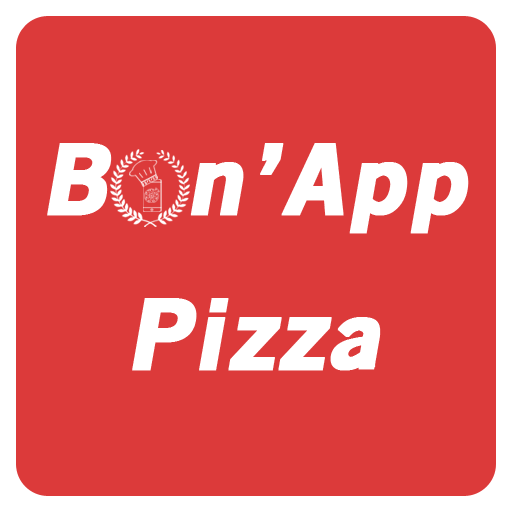
<style>
.page{position:relative;width:512px;height:512px;background:#dc3a3a}
.page>*{position:absolute;margin:0}
.t1{font:96px "OldSansBlack";letter-spacing:0.05em;color:#ffffff;font-weight:bold;font-style:italic}
</style>
<div class="page">
<p class="t1" style="left:47px;top:143px;width:422px;height:91px">B  n’App</p>
<p class="t1" style="left:132px;top:298px;width:249px;height:73px">Pizza</p>
</div>
